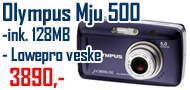
<style>
.page{position:relative;width:190px;height:90px;background:#ffffff}
.page>*{position:absolute;margin:0}
.t1{font:18px/20px "AgencyFB-Bold";letter-spacing:-0.005em;color:#003466}
.t2{font:24px/24px "AgencyFB-Bold";letter-spacing:-0.005em;color:#003466}
.t3{font:24px/25px "AgencyFB-Bold";letter-spacing:-0.005em;color:#f10808}
</style>
<div class="page">
<p class="t1" style="left:2px;top:2px;width:138px;height:86px"><span class="t2">Olympus Mju 500<br></span>-ink. 128MB <br>- Lowepro veske<br>  <span class="t3">3890,-</span></p>
</div>
